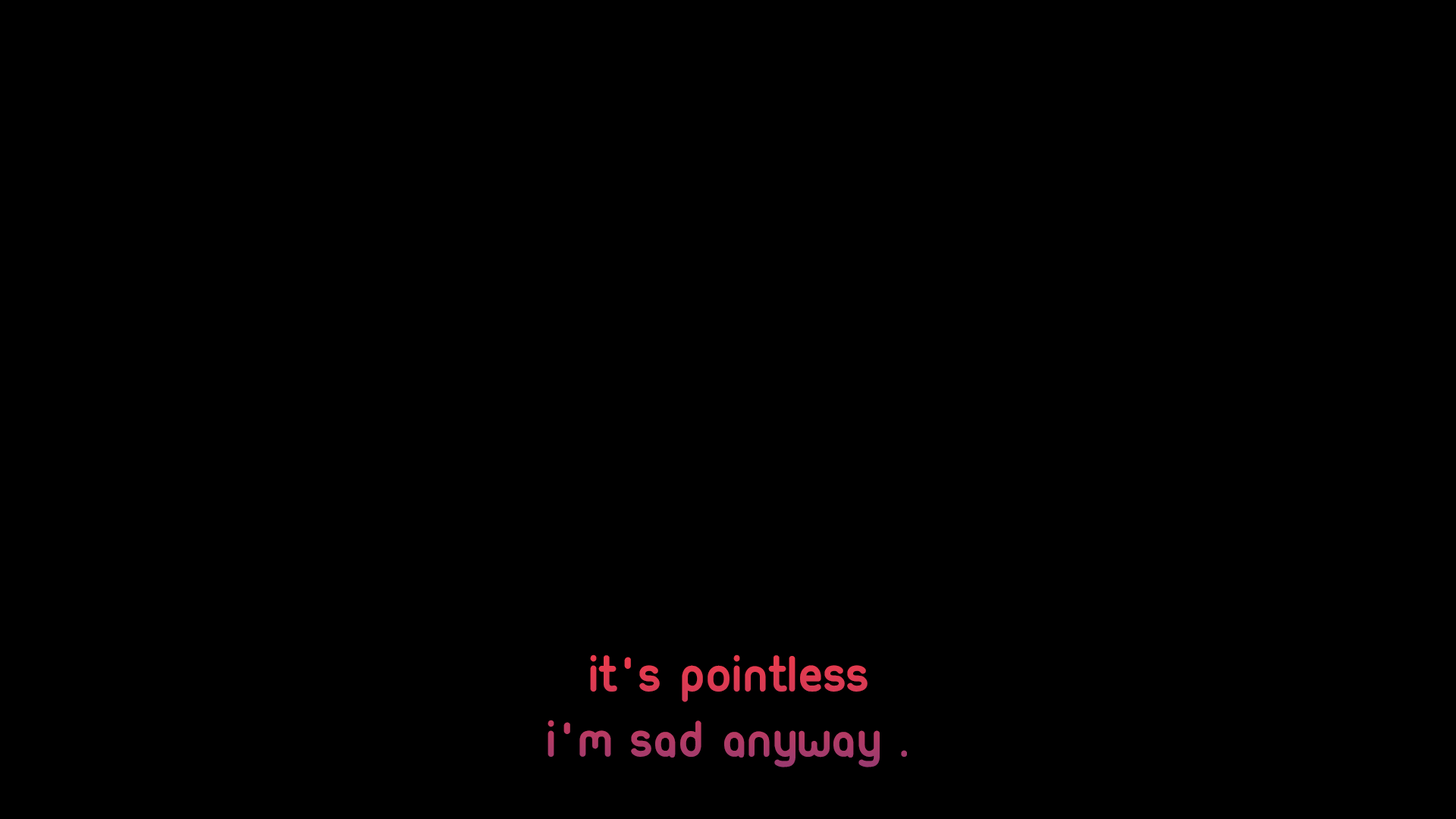
<style>
.page{position:relative;width:1456px;height:819px;background:#000000}
.page>*{position:absolute;margin:0}
.t1{font:54.6px "Ubuntu-Title"}
</style>
<div class="page">
<p class="t1" style="left:548px;top:654px;width:359px;height:113px;text-align:center">it's pointless<br>i'm sad anyway .</p>
</div>
